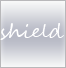
<style>
.page{position:relative;width:66px;height:68px}
.page>*{position:absolute;margin:0}
.t1{font:18.7px "SegoeScript";color:#ffffff}
</style>
<div class="page">
<p class="t1" style="left:0px;top:23px;width:64px;height:17px">shield</p>
</div>
